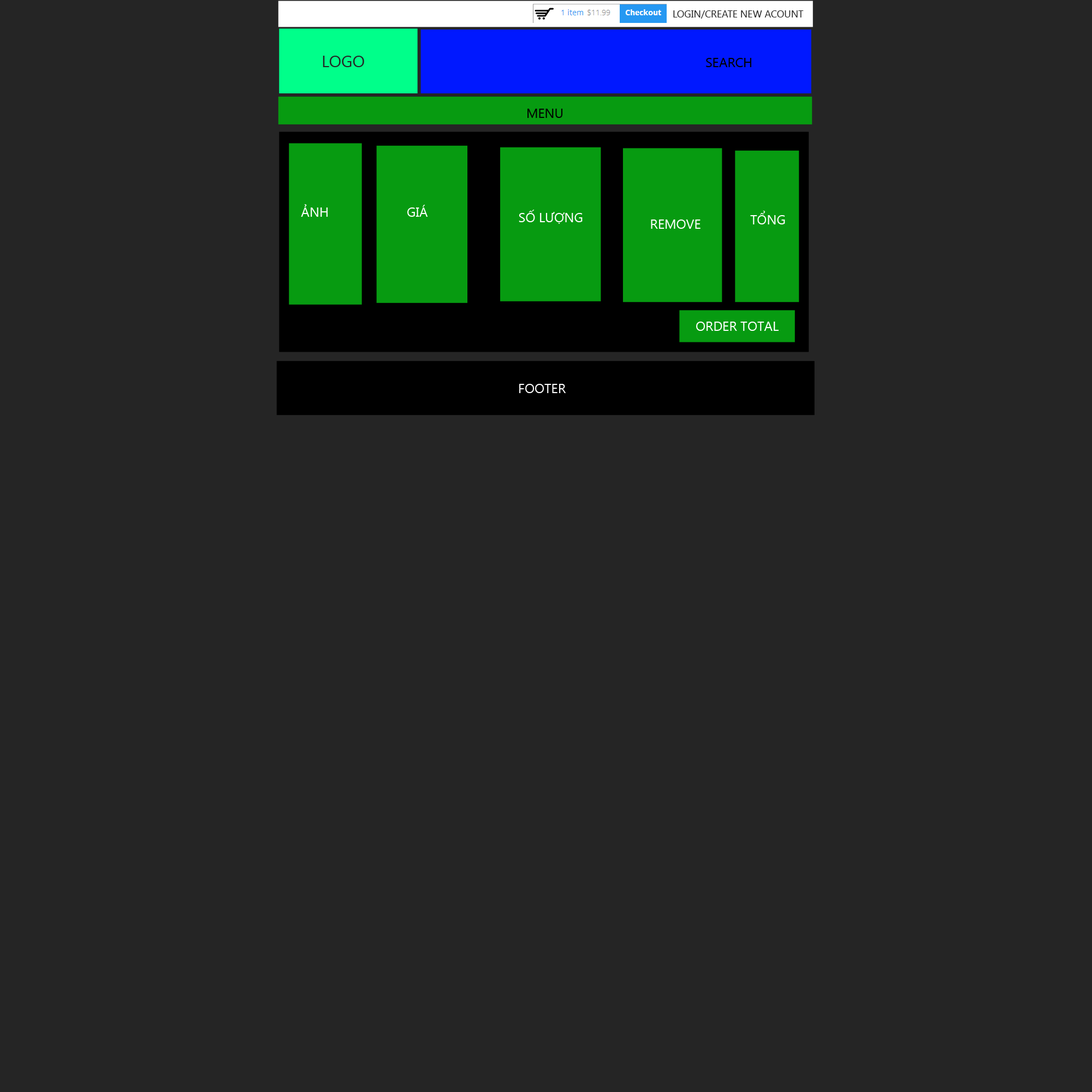
<style>
.page{position:relative;width:1092px;height:1092px;background:#252525}
.page>*{position:absolute;margin:0}
.t1{font:9.8px "SegoeUI";color:#252525;text-transform:uppercase}
.t2{font:16.4px "SegoeUI";color:#252525;text-transform:uppercase}
.t3{font:13.1px "SegoeUI";color:#000000;text-transform:uppercase}
.t4{font:13.1px "SegoeUI";color:#ffffff;text-transform:uppercase}
</style>
<div class="page">
<p class="t1" style="left:673px;top:10px;width:131px;height:9px">login/create new acount</p>
<p class="t2" style="left:323px;top:56px;width:41px;height:11px">Logo</p>
<p class="t3" style="left:706px;top:58px;width:45px;height:9px">search</p>
<p class="t3" style="left:527px;top:109px;width:36px;height:9px">menu</p>
<p class="t4" style="left:301px;top:204px;width:27px;height:13px">ảnh</p>
<p class="t4" style="left:407px;top:205px;width:21px;height:12px">giá</p>
<p class="t4" style="left:519px;top:210px;width:64px;height:14px">số lượng</p>
<p class="t4" style="left:651px;top:219px;width:50px;height:10px">remove</p>
<p class="t4" style="left:750px;top:211px;width:35px;height:13px">tổng</p>
<p class="t4" style="left:696px;top:322px;width:83px;height:9px">Order total</p>
<p class="t4" style="left:519px;top:384px;width:47px;height:9px">footer</p>
</div>
